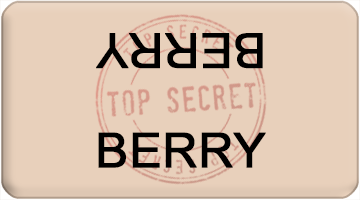
<style>
.page{position:relative;width:360px;height:200px;background:#e8d0bb}
.page>*{position:absolute;margin:0}
.t1{font:48px "ArialMT";color:#000000;font-weight:bold}
</style>
<div class="page">
<p class="t1" style="left:96px;top:33px;width:167px;height:36px;rotate:180deg">BERRY</p>
<p class="t1" style="left:98px;top:132px;width:168px;height:36px">BERRY</p>
</div>
